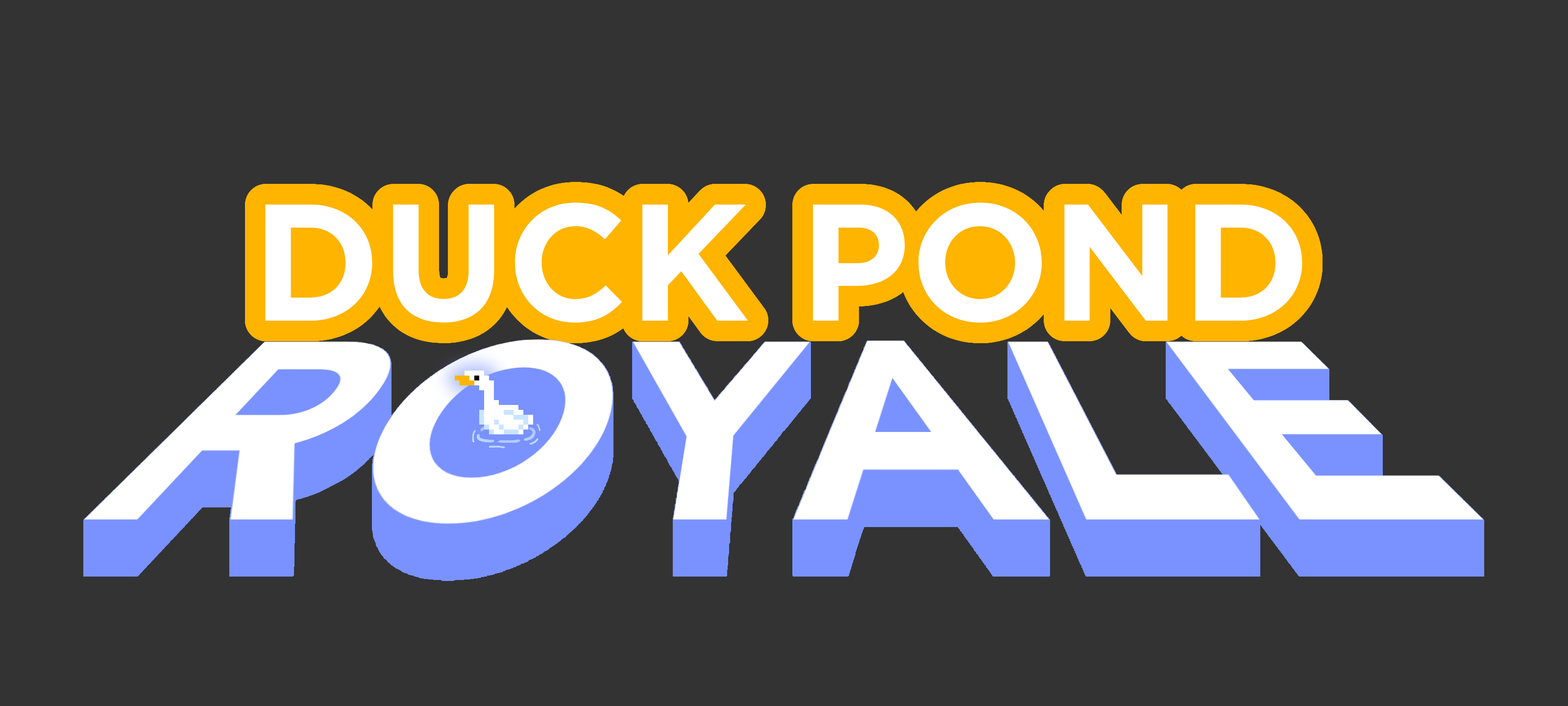
<style>
.page{position:relative;width:1568px;height:706px;background:#333333}
.page>*{position:absolute;margin:0}
.t1{font:165.6px "Gotham-Bold";color:#ffffff}
</style>
<div class="page">
<p class="t1" style="left:265px;top:202px;width:1037px;height:121px">DUCK POND</p>
</div>
